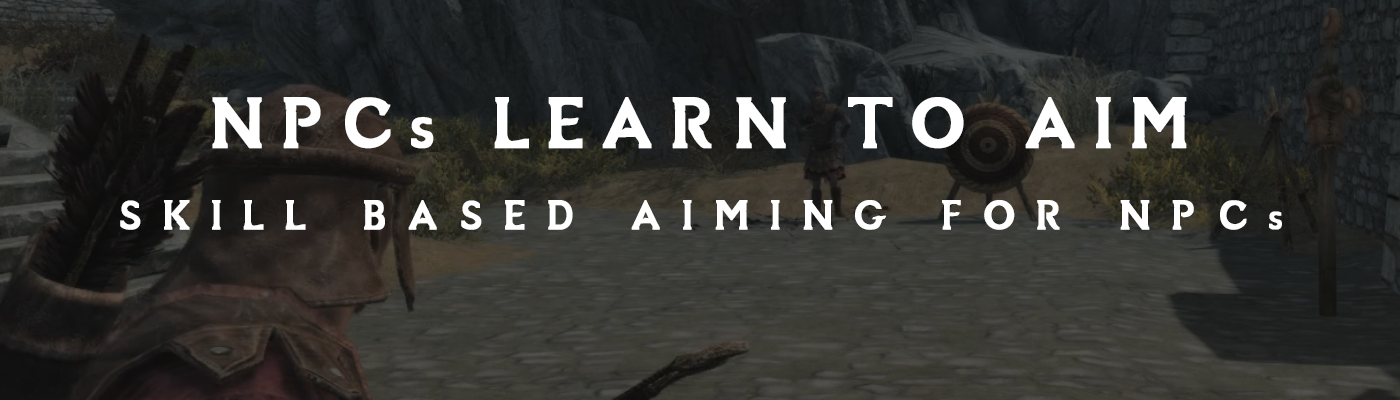
<style>
.page{position:relative;width:1400px;height:400px}
.page>*{position:absolute;margin:0}
.t1{font:90px "SovngardeLight";letter-spacing:0.18em;color:#ffffff;font-weight:bold}
.t2{font:52px "SovngardeLight";letter-spacing:0.4em;color:#ffffff;font-weight:bold}
</style>
<div class="page">
<p class="t1" style="left:212px;top:97px;width:975px;height:52px">NPCs LEARN TO AIM</p>
<p class="t2" style="left:120px;top:200px;width:1162px;height:30px">SKILL BASED AIMING FOR NPCs</p>
</div>
